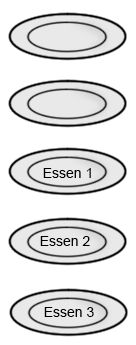
<style>
.page{position:relative;width:136px;height:345px;background:#ffffff}
.page>*{position:absolute;margin:0}
.t1{font:14px "ArialMT";color:#000000}
</style>
<div class="page">
<p class="t1" style="left:43px;top:168px;width:48px;height:10px">Essen 1</p>
<p class="t1" style="left:40px;top:236px;width:50px;height:10px">Essen 2</p>
<p class="t1" style="left:44px;top:307px;width:50px;height:10px">Essen 3</p>
</div>
